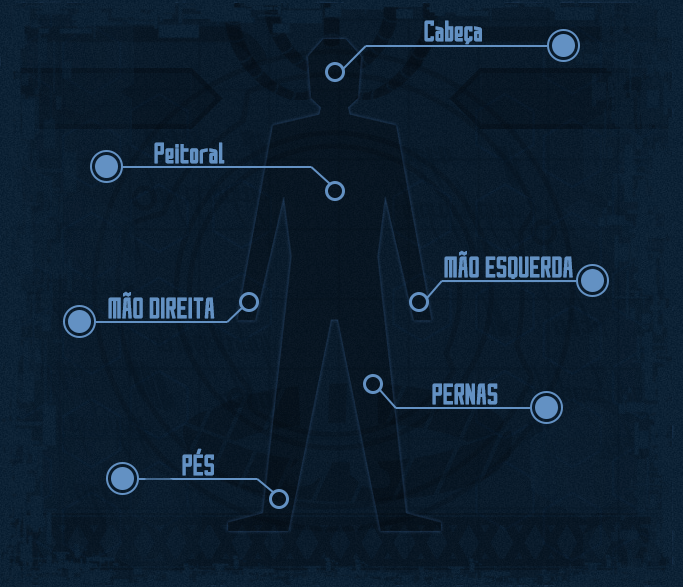
<style>
.page{position:relative;width:683px;height:587px}
.page>*{position:absolute;margin:0}
.t1{font:25px "SAOUI-Regular";color:#6391c3;font-weight:bold}
.t2{font:25px "SAOUI-Regular";color:#6391c3;text-transform:uppercase;font-weight:bold}
</style>
<div class="page">
<p class="t1" style="left:424px;top:20px;width:58px;height:25px">Cabeça</p>
<p class="t1" style="left:154px;top:142px;width:71px;height:22px">Peitoral</p>
<p class="t2" style="left:444px;top:250px;width:129px;height:29px">mão esquerda</p>
<p class="t2" style="left:108px;top:291px;width:107px;height:28px">mão direita</p>
<p class="t2" style="left:432px;top:383px;width:66px;height:22px">pernas</p>
<p class="t2" style="left:182px;top:448px;width:32px;height:28px">pés</p>
</div>
